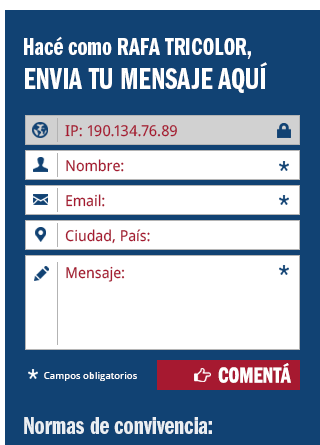
<style>
.page{position:relative;width:320px;height:445px;background:#114273}
.page>*{position:absolute;margin:0}
.t1{font:25px "ITCFranklinGothicStd-DmCp";color:#ffffff}
.t2{font:30px "ITCFranklinGothicStd-DmCp";color:#ffffff;text-transform:uppercase}
.t3{font:30px "ITCFranklinGothicStd-DmCp";text-transform:uppercase}
.t4{font:15px "DroidSans";color:#a61930;text-transform:uppercase}
.t5{font:15px "DroidSans";color:#a61930}
.t6{font:22.5px "ITCFranklinGothicStd-DmCp";color:#ffffff}
.t7{font:10px "DroidSans";color:#ffffff}
</style>
<div class="page">
<p class="t1" style="left:24px;top:36px;width:227px;height:23px">Hacé como RAFA TRICOLOR,</p>
<p class="t2" style="left:25px;top:62px;width:242px;height:31px">EnvIa tu mensaje AQUÍ</p>
<p class="t3" style="left:25px;top:67px;width:242px;height:31px">EnvIa tu mensaje AQUÍ</p>
<p class="t4" style="left:65px;top:125px;width:112px;height:12px">ip: 190.134.76.89</p>
<p class="t5" style="left:66px;top:159px;width:58px;height:13px">Nombre:</p>
<p class="t5" style="left:66px;top:194px;width:39px;height:13px">Email:</p>
<p class="t5" style="left:65px;top:229px;width:85px;height:15px">Ciudad, País:</p>
<p class="t5" style="left:66px;top:266px;width:59px;height:16px">Mensaje:</p>
<p class="t6" style="left:218px;top:363px;width:73px;height:20px">COMENTÁ</p>
<p class="t7" style="left:44px;top:372px;width:93px;height:9px">Campos obligatorios</p>
<p class="t1" style="left:24px;top:417px;width:188px;height:17px">Normas de convivencia:</p>
</div>
